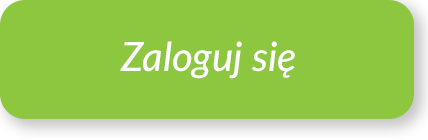
<style>
.page{position:relative;width:428px;height:140px;background:#8dc63f}
.page>*{position:absolute;margin:0}
.t1{font:40px "Lato-MediumItalic";color:#ffffff}
</style>
<div class="page">
<p class="t1" style="left:120px;top:41px;width:175px;height:38px">Zaloguj się</p>
</div>
